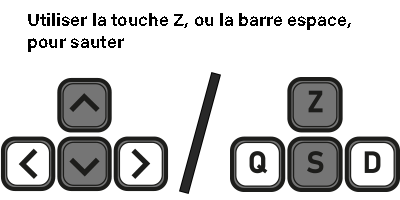
<style>
.page{position:relative;width:400px;height:200px;background:#ffffff}
.page>*{position:absolute;margin:0}
.t1{font:18px "AcuminConcept-Bold";color:#000000}
</style>
<div class="page">
<p class="t1" style="left:28px;top:13px;width:323px;height:39px">Utiliser la touche Z, ou la barre espace, pour sauter</p>
</div>
